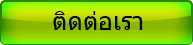
<style>
.page{position:relative;width:193px;height:45px}
.page>*{position:absolute;margin:0}
.t1{font:25px "Tahoma";color:#040404}
</style>
<div class="page">
<p class="t1" style="left:53px;top:11px;width:90px;height:19px">ติดต่อเรา</p>
</div>
